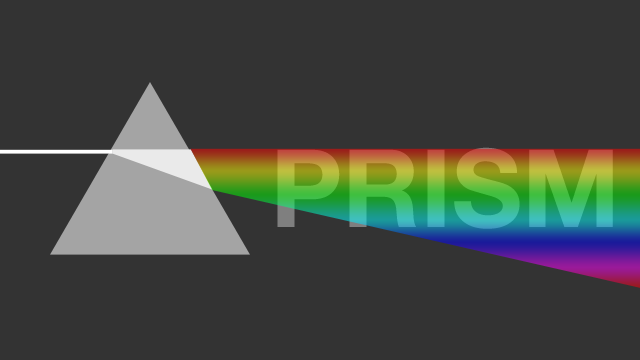
<style>
.page{position:relative;width:640px;height:360px;background:#333333}
.page>*{position:absolute;margin:0}
.t1{font:108px "HelveticaNeueBold"}
</style>
<div class="page">
<p class="t1" style="left:277px;top:147px;width:336px;height:82px">PRISM</p>
</div>
